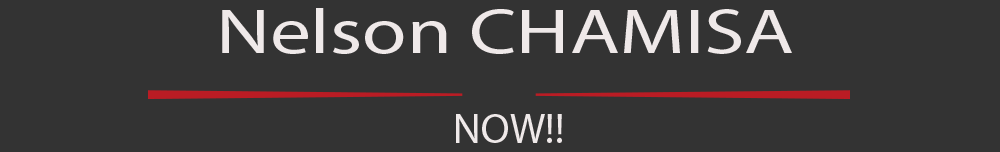
<style>
.page{position:relative;width:1000px;height:152px;background:#333333}
.page>*{position:absolute;margin:0}
.t1{font:63.8px "MyriadPro-Regular";color:#efe9e9;scale:1.28 1}
.t2{font:42px "MyriadPro-Regular";color:#efe9e9}
</style>
<div class="page">
<p class="t1" style="left:222px;top:8px;width:570px;height:46px">Nelson CHAMISA</p>
<p class="t2" style="left:456px;top:114px;width:106px;height:29px">NOW!!</p>
</div>
